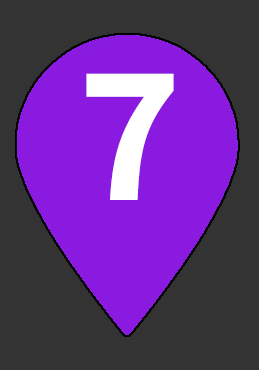
<style>
.page{position:relative;width:259px;height:370px;background:#333333}
.page>*{position:absolute;margin:0}
.t1{font:198.4px "SourceSansRoman_667wght";color:#ffffff}
</style>
<div class="page">
<p class="t1" style="left:86px;top:73px;width:88px;height:127px">7</p>
</div>
